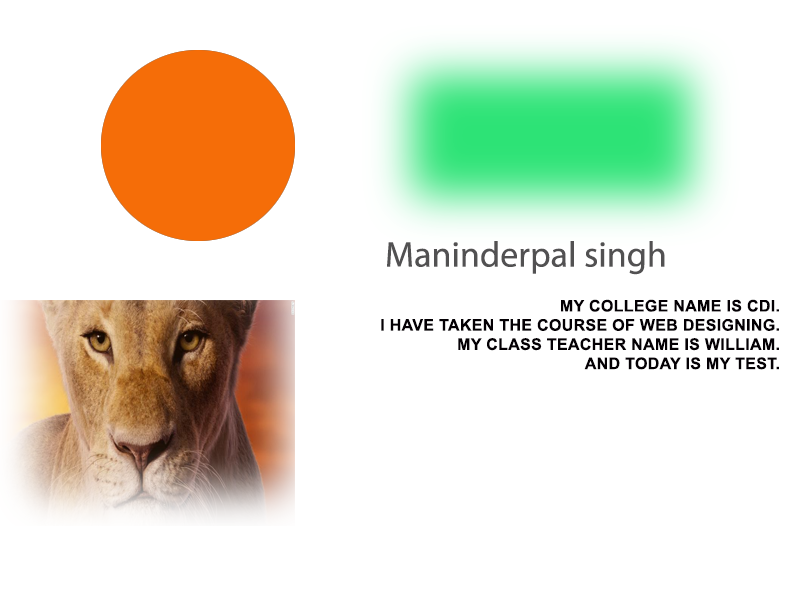
<style>
.page{position:relative;width:800px;height:600px;background:#ffffff}
.page>*{position:absolute;margin:0}
.t1{font:36px "MyriadPro-Regular";color:#525152}
.t2{font:16px "Arial-BoldMT";letter-spacing:0.02em;color:#040004}
</style>
<div class="page">
<p class="t1" style="left:387px;top:241px;width:278px;height:34px">Maninderpal singh</p>
<p class="t2" style="left:381px;top:299px;width:398px;height:71px;text-align:right">MY COLLEGE NAME IS CDI.<br>I HAVE TAKEN THE COURSE OF WEB DESIGNING.<br>MY CLASS TEACHER NAME IS WILLIAM.<br>AND TODAY IS MY TEST.</p>
</div>
